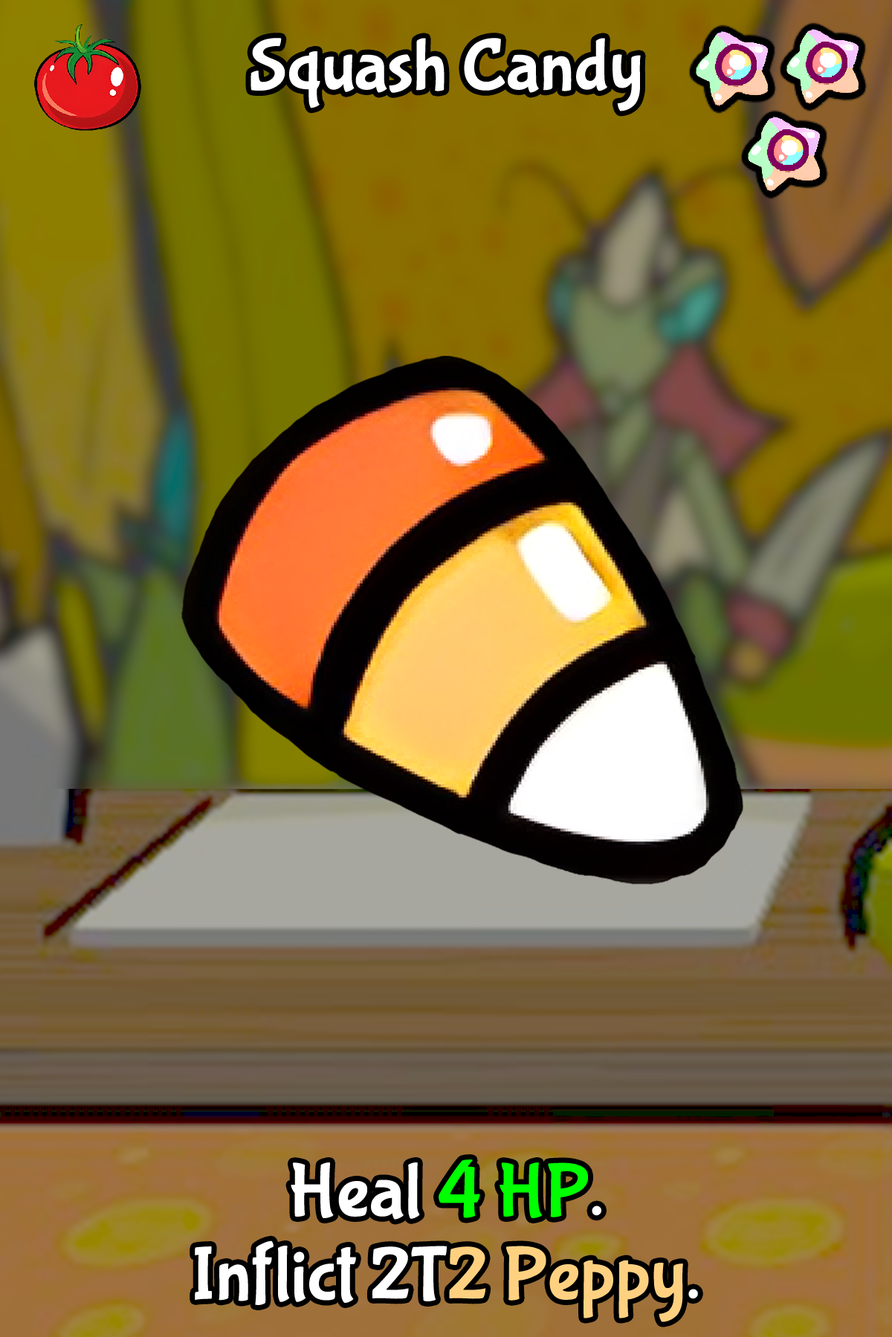
<style>
.page{position:relative;width:892px;height:1337px}
.page>*{position:absolute;margin:0}
.t1{font:126.3px "BubblegumSans-Regular";color:#ffffff}
.t2{font:132.3px/83.2px "BubblegumSans-Regular";color:#ffffff}
.t3{font:132.3px/83.2px "BubblegumSans-Regular";color:#00ff00}
.t4{font:132.3px/83.2px "BubblegumSans-Regular";color:#fed181}
</style>
<div class="page">
<p class="t1" style="left:250px;top:38px;width:390px;height:73px">Squash Candy</p>
<p class="t2" style="left:195px;top:1160px;width:503px;height:163px;text-align:center">Heal <span class="t3">4 HP</span>.<br>Inflict 2T<span class="t4">2 Peppy</span>.</p>
</div>
